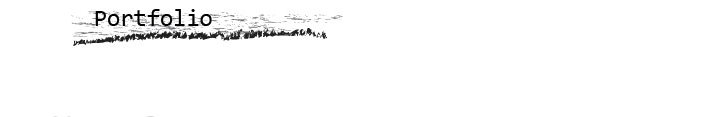
<style>
.page{position:relative;width:727px;height:117px;background:#ffffff}
.page>*{position:absolute;margin:0}
.t1{font:24px "Consolas";color:#030303}
</style>
<div class="page">
<p class="t1" style="left:95px;top:9px;width:117px;height:17px">Portfolio</p>
</div>
